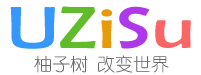
<style>
.page{position:relative;width:201px;height:75px;background:#ffffff}
.page>*{position:absolute;margin:0}
.t1{font:60px "BerlinSansFB-Reg";color:#3698fd;scale:1.3 1}
.t2{font:60px "BerlinSansFB-Reg";color:#60bc28;scale:1.3 1}
.t3{font:60px "BerlinSansFB-Reg";color:#e69b0a;scale:1.3 1}
.t4{font:60px "BerlinSansFB-Reg";color:#ae39ea;scale:1.3 1}
.t5{font:60px "BerlinSansFB-Reg";color:#fa6666;scale:1.3 1}
.t6{font:18px "YouYuan";color:#666666}
</style>
<div class="page">
<p class="t1" style="left:10px;top:6px;width:181px;height:43px">U<span class="t2">Z</span><span class="t3">i</span><span class="t4">S</span><span class="t5">u</span></p>
<p class="t6" style="left:34px;top:55px;width:135px;height:18px">柚子树 改变世界</p>
</div>
